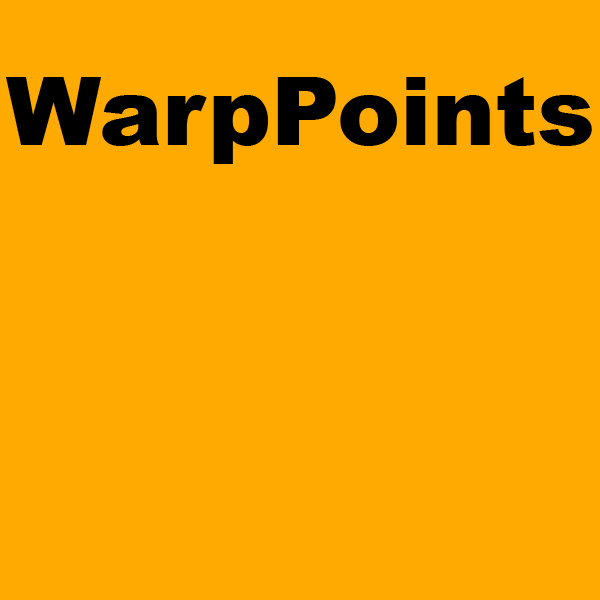
<style>
.page{position:relative;width:600px;height:600px;background:#ffaa00}
.page>*{position:absolute;margin:0}
.t1{font:94.7px "Arial-Black";color:#010000}
</style>
<div class="page">
<p class="t1" style="left:6px;top:77px;width:586px;height:87px">WarpPoints</p>
</div>
